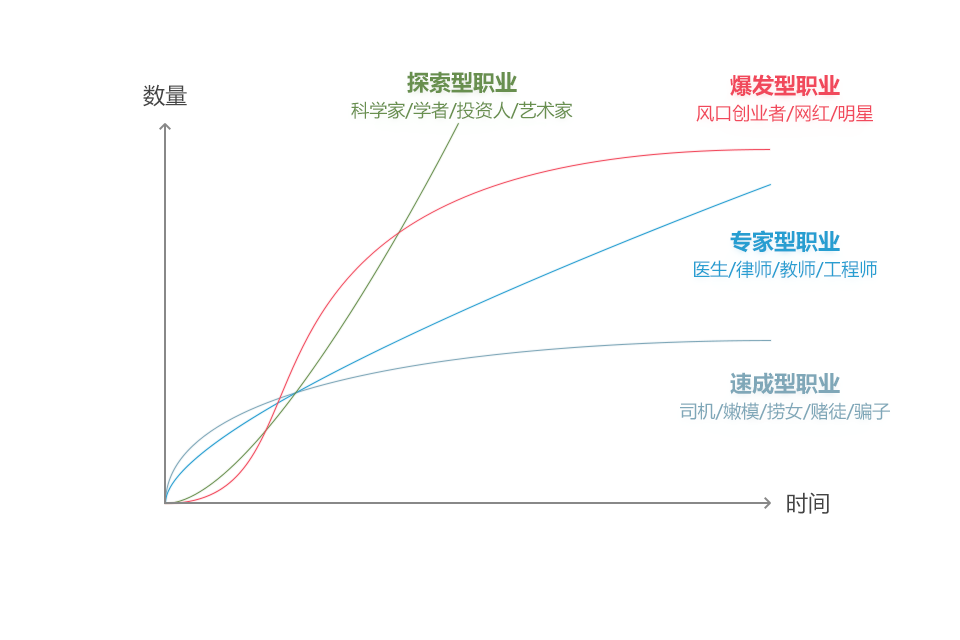
<style>
.page{position:relative;width:960px;height:640px;background:#ffffff}
.page>*{position:absolute;margin:0}
.t1{font:18px/30px "MicrosoftYaHei";color:#688f4e}
.t2{font:22px/30px "MicrosoftYaHei-Bold";color:#688f4e}
.t3{font:18px/30px "MicrosoftYaHei";color:#f1485b}
.t4{font:22px/30px "MicrosoftYaHei-Bold";color:#f1485b}
.t5{font:22px "MicrosoftYaHei";color:#444444}
.t6{font:18px/30px "MicrosoftYaHei";color:#279ed1}
.t7{font:22px/30px "MicrosoftYaHei-Bold";color:#279ed1}
.t8{font:18px/30px "MicrosoftYaHei";color:#7fa7b8}
.t9{font:22px/30px "MicrosoftYaHei-Bold";color:#7fa7b8}
</style>
<div class="page">
<p class="t1" style="left:351px;top:71px;width:222px;height:48px;text-align:center"><span class="t2">探索型职业<br></span>科学家/学者/投资人/艺术家</p>
<p class="t3" style="left:696px;top:74px;width:177px;height:48px;text-align:center"><span class="t4">爆发型职业<br></span>风口创业者/网红/明星</p>
<p class="t5" style="left:143px;top:84px;width:44px;height:23px">数量</p>
<p class="t6" style="left:694px;top:230px;width:183px;height:48px;text-align:center"><span class="t7">专家型职业<br></span>医生/律师/教师/工程师</p>
<p class="t8" style="left:680px;top:372px;width:210px;height:48px;text-align:center"><span class="t9">速成型职业<br></span>司机/嫩模/捞女/赌徒/骗子</p>
<p class="t5" style="left:787px;top:492px;width:42px;height:22px">时间</p>
</div>
